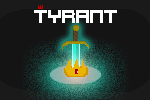
<style>
.page{position:relative;width:150px;height:100px;background:#141414}
.page>*{position:absolute;margin:0}
.t1{font:12.5px "PixelCaps!";color:#ffffff}
</style>
<div class="page">
<p class="t1" style="left:34px;top:10px;width:83px;height:13px">TYRANT</p>
</div>
